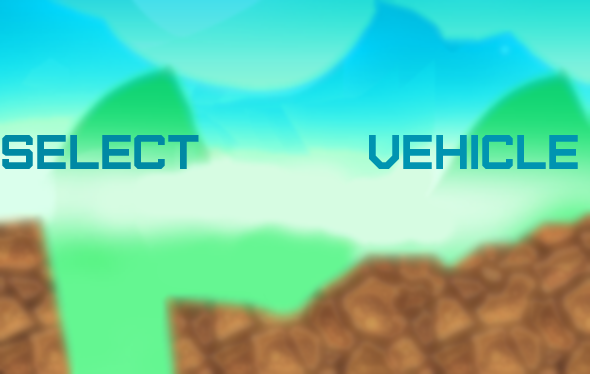
<style>
.page{position:relative;width:590px;height:374px}
.page>*{position:absolute;margin:0}
.t1{font:48px "Furore";color:#0089a4}
.t2{font:48px "Furore";color:#0094b1}
</style>
<div class="page">
<p class="t1" style="left:2px;top:135px;width:197px;height:34px">SELECT</p>
<p class="t2" style="left:369px;top:135px;width:209px;height:34px">VEHICLE</p>
</div>
